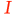
<style>
.page{position:relative;width:16px;height:16px;background:#ffffff}
.page>*{position:absolute;margin:0}
.t1{font:18.7px "FangSong_GB2312";color:#ff1e00;text-transform:uppercase;font-weight:bold;font-style:italic}
</style>
<div class="page">
<p class="t1" style="left:4px;top:0px;width:8px;height:14px">I</p>
</div>
